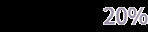
<style>
.page{position:relative;width:148px;height:32px;background:#000000}
.page>*{position:absolute;margin:0}
.t1{font:22px "WebPSD-18463539-0-Regular";color:#988ea2;font-weight:bold}
</style>
<div class="page">
<p class="t1" style="left:0px;top:0px;width:148px;height:32px">20%</p>
</div>
